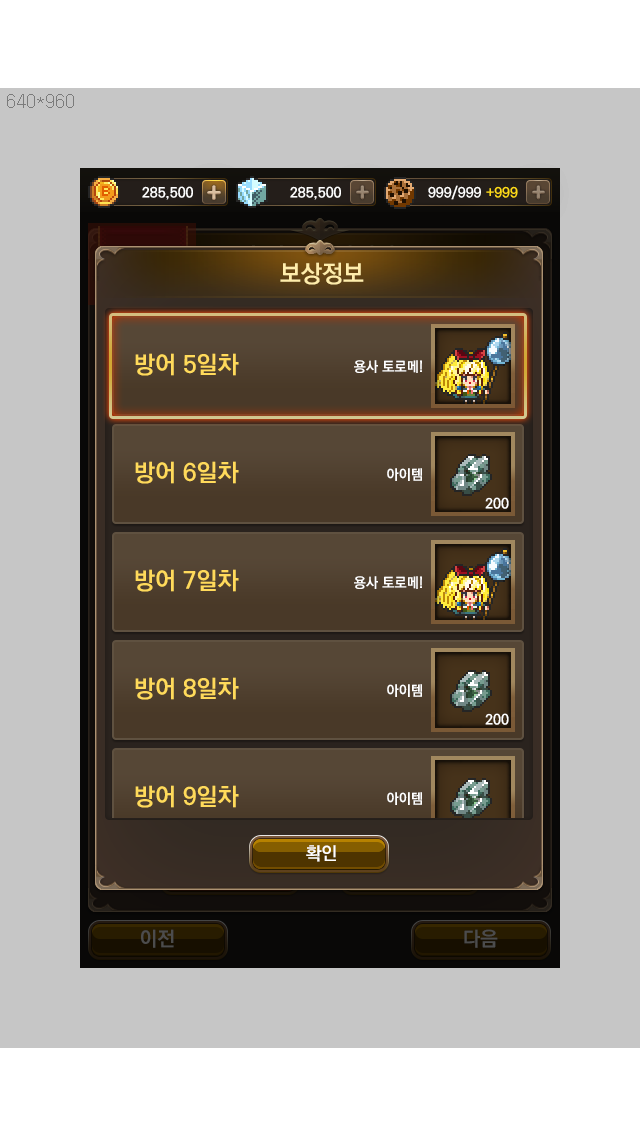
<style>
.page{position:relative;width:640px;height:1136px;background:#c6c6c6}
.page>*{position:absolute;margin:0}
.t1{font:24px "KoPubDotumBold";color:#ffedab}
.t2{font:24px "KoPubDotumBold";color:#ffda5b}
.t3{font:14px "KoPubDotumBold";color:#ffffff}
.t4{font:18px "KoPubDotumBold";color:#ffffff}
</style>
<div class="page">
<p class="t1" style="left:280px;top:262px;width:84px;height:23px">보상정보</p>
<p class="t2" style="left:135px;top:353px;width:104px;height:23px">방어 5일차</p>
<p class="t3" style="left:354px;top:360px;width:68px;height:13px">용사 토로메!</p>
<p class="t2" style="left:135px;top:461px;width:104px;height:23px">방어 6일차</p>
<p class="t3" style="left:387px;top:468px;width:35px;height:13px">아이템</p>
<p class="t3" style="left:485px;top:497px;width:24px;height:12px">200</p>
<p class="t2" style="left:135px;top:569px;width:104px;height:23px">방어 7일차</p>
<p class="t3" style="left:354px;top:576px;width:68px;height:13px">용사 토로메!</p>
<p class="t2" style="left:135px;top:677px;width:104px;height:23px">방어 8일차</p>
<p class="t3" style="left:387px;top:684px;width:35px;height:13px">아이템</p>
<p class="t3" style="left:485px;top:713px;width:24px;height:12px">200</p>
<p class="t4" style="left:306px;top:845px;width:30px;height:17px">확인</p>
</div>
